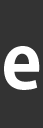
<style>
.page{position:relative;width:43px;height:128px;background:#333333}
.page>*{position:absolute;margin:0}
.t1{font:75px "AdobeGothicStd-Bold";color:#ffffff}
</style>
<div class="page">
<p class="t1" style="left:4px;top:46px;width:36px;height:44px">e</p>
</div>
